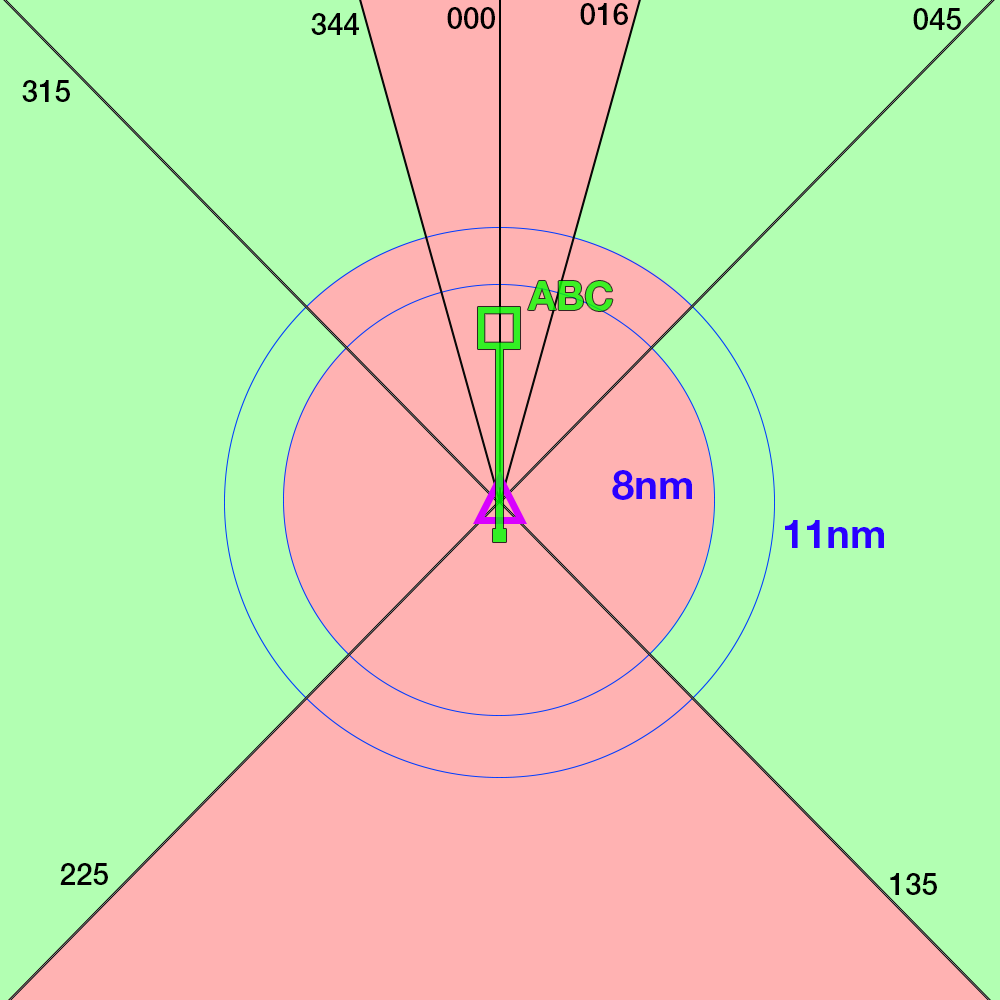
<style>
.page{position:relative;width:1000px;height:1000px;background:#b2ffb2}
.page>*{position:absolute;margin:0}
.t1{font:29.7px "HelveticaNeueLTStd-Md";color:#000000}
.t2{font:40px "HelveticaNeueLTStd-Bd";color:#3df024}
.t3{font:40px "HelveticaNeueLTStd-Bd";color:#2a00ff}
</style>
<div class="page">
<p class="t1" style="left:580px;top:3px;width:48px;height:22px">016</p>
<p class="t1" style="left:311px;top:13px;width:48px;height:22px">344</p>
<p class="t1" style="left:447px;top:7px;width:48px;height:22px">000</p>
<p class="t1" style="left:913px;top:8px;width:48px;height:22px">045</p>
<p class="t1" style="left:22px;top:80px;width:48px;height:22px">315</p>
<p class="t2" style="left:528px;top:281px;width:85px;height:30px">ABC</p>
<p class="t3" style="left:612px;top:470px;width:80px;height:30px">8nm</p>
<p class="t3" style="left:785px;top:520px;width:99px;height:28px">11nm</p>
<p class="t1" style="left:60px;top:863px;width:48px;height:22px">225</p>
<p class="t1" style="left:890px;top:873px;width:47px;height:22px">135</p>
</div>
